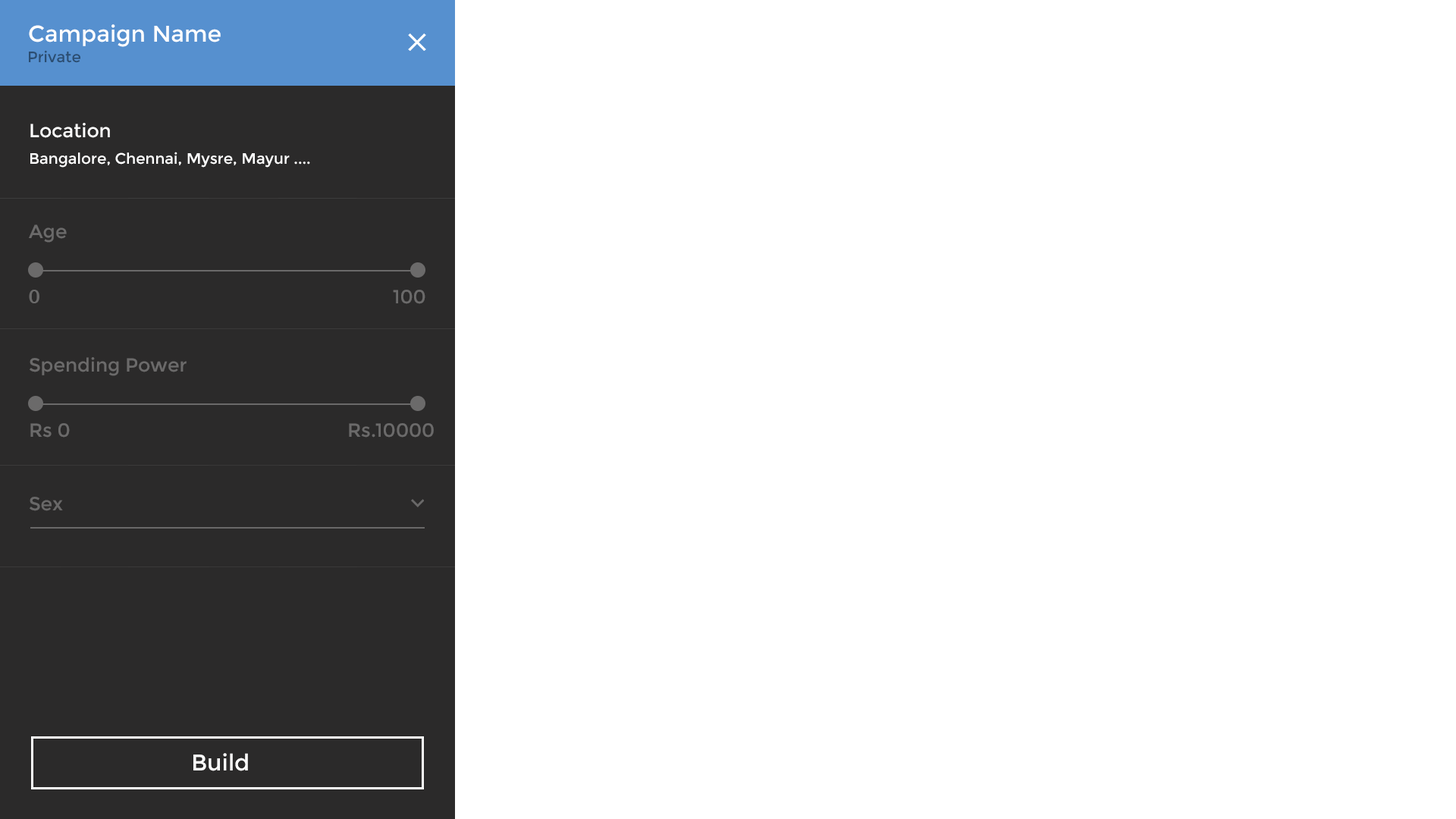
<style>
.page{position:relative;width:1456px;height:819px;background:#ffffff}
.page>*{position:absolute;margin:0}
.t1{font:22.7px "Montserrat-Regular";color:#ffffff}
.t2{font:15.2px "Montserrat-Regular";color:#2b4d71}
.t3{font:19px "Montserrat-Regular";color:#ffffff}
.t4{font:15.2px "Montserrat-Regular";color:#ffffff}
.t5{font:19px "Montserrat-Regular";color:#6b6a6a}
.t6{font:19px "Lato-Bold";color:#6b6a6a}
.t7{font:19px "Montserrat-Regular";color:#696868}
</style>
<div class="page">
<p class="t1" style="left:29px;top:24px;width:192px;height:23px">Campaign Name</p>
<p class="t2" style="left:29px;top:50px;width:51px;height:13px">Private</p>
<p class="t3" style="left:30px;top:123px;width:80px;height:15px">Location</p>
<p class="t4" style="left:30px;top:152px;width:280px;height:16px">Bangalore, Chennai, Mysre, Mayur ....</p>
<p class="t5" style="left:29px;top:224px;width:38px;height:19px">Age</p>
<p class="t6" style="left:29px;top:290px;width:10px;height:13px">0</p>
<p class="t5" style="left:393px;top:290px;width:32px;height:14px">100</p>
<p class="t5" style="left:30px;top:357px;width:157px;height:19px">Spending Power</p>
<p class="t5" style="left:30px;top:423px;width:40px;height:15px">Rs 0</p>
<p class="t5" style="left:349px;top:423px;width:85px;height:15px">Rs.10000</p>
<p class="t7" style="left:30px;top:497px;width:33px;height:14px">Sex</p>
<p class="t1" style="left:193px;top:753px;width:55px;height:18px">Build</p>
</div>
